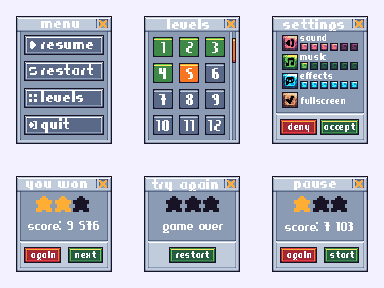
<style>
.page{position:relative;width:384px;height:288px;background:#f3f0ff}
.page>*{position:absolute;margin:0}
.t1{font:18px "CraftPixNetSurvivalKit";letter-spacing:-0.06em;color:#ffffff}
.t2{font:12px "CraftPixNetSurvivalKit";letter-spacing:-0.06em;color:#ffffff}
.t3{font:15px "CraftPixNetSurvivalKit";letter-spacing:-0.06em;color:#ffffff}
</style>
<div class="page">
<p class="t1" style="left:41px;top:21px;width:38px;height:7px">menu</p>
<p class="t1" style="left:167px;top:18px;width:42px;height:11px">levels</p>
<p class="t1" style="left:283px;top:18px;width:61px;height:15px">settings</p>
<p class="t2" style="left:300px;top:34px;width:26px;height:7px">sound</p>
<p class="t1" style="left:41px;top:42px;width:52px;height:7px">resume</p>
<p class="t1" style="left:161px;top:42px;width:4px;height:11px">1</p>
<p class="t1" style="left:186px;top:42px;width:7px;height:11px">2</p>
<p class="t1" style="left:212px;top:42px;width:6px;height:11px">3</p>
<p class="t2" style="left:300px;top:53px;width:26px;height:7px">music</p>
<p class="t1" style="left:41px;top:64px;width:52px;height:11px">restart</p>
<p class="t1" style="left:159px;top:68px;width:7px;height:11px">4</p>
<p class="t1" style="left:186px;top:68px;width:7px;height:11px">5</p>
<p class="t1" style="left:212px;top:68px;width:7px;height:11px">6</p>
<p class="t2" style="left:300px;top:72px;width:32px;height:7px">effects</p>
<p class="t1" style="left:41px;top:91px;width:42px;height:11px">levels</p>
<p class="t1" style="left:159px;top:94px;width:7px;height:11px">7</p>
<p class="t1" style="left:186px;top:94px;width:7px;height:11px">8</p>
<p class="t1" style="left:212px;top:94px;width:7px;height:11px">9</p>
<p class="t2" style="left:301px;top:97px;width:44px;height:7px">fullscreen</p>
<p class="t1" style="left:41px;top:118px;width:28px;height:15px">quit</p>
<p class="t1" style="left:156px;top:120px;width:13px;height:11px">10</p>
<p class="t1" style="left:184px;top:120px;width:10px;height:11px">11</p>
<p class="t1" style="left:208px;top:120px;width:13px;height:11px">12</p>
<p class="t2" style="left:288px;top:123px;width:21px;height:10px">deny</p>
<p class="t2" style="left:324px;top:123px;width:31px;height:10px">accept</p>
<p class="t1" style="left:26px;top:181px;width:61px;height:11px">you won</p>
<p class="t1" style="left:152px;top:178px;width:66px;height:15px">try again</p>
<p class="t1" style="left:294px;top:181px;width:42px;height:11px">pause</p>
<p class="t3" style="left:28px;top:221px;width:71px;height:9px">score: 9 576</p>
<p class="t3" style="left:285px;top:222px;width:68px;height:9px">score: 7 103</p>
<p class="t3" style="left:163px;top:224px;width:60px;height:9px">game over</p>
<p class="t2" style="left:31px;top:251px;width:24px;height:10px">again</p>
<p class="t2" style="left:75px;top:251px;width:21px;height:7px">next</p>
<p class="t2" style="left:176px;top:251px;width:33px;height:7px">restart</p>
<p class="t2" style="left:287px;top:251px;width:24px;height:10px">again</p>
<p class="t2" style="left:330px;top:251px;width:24px;height:7px">start</p>
</div>
